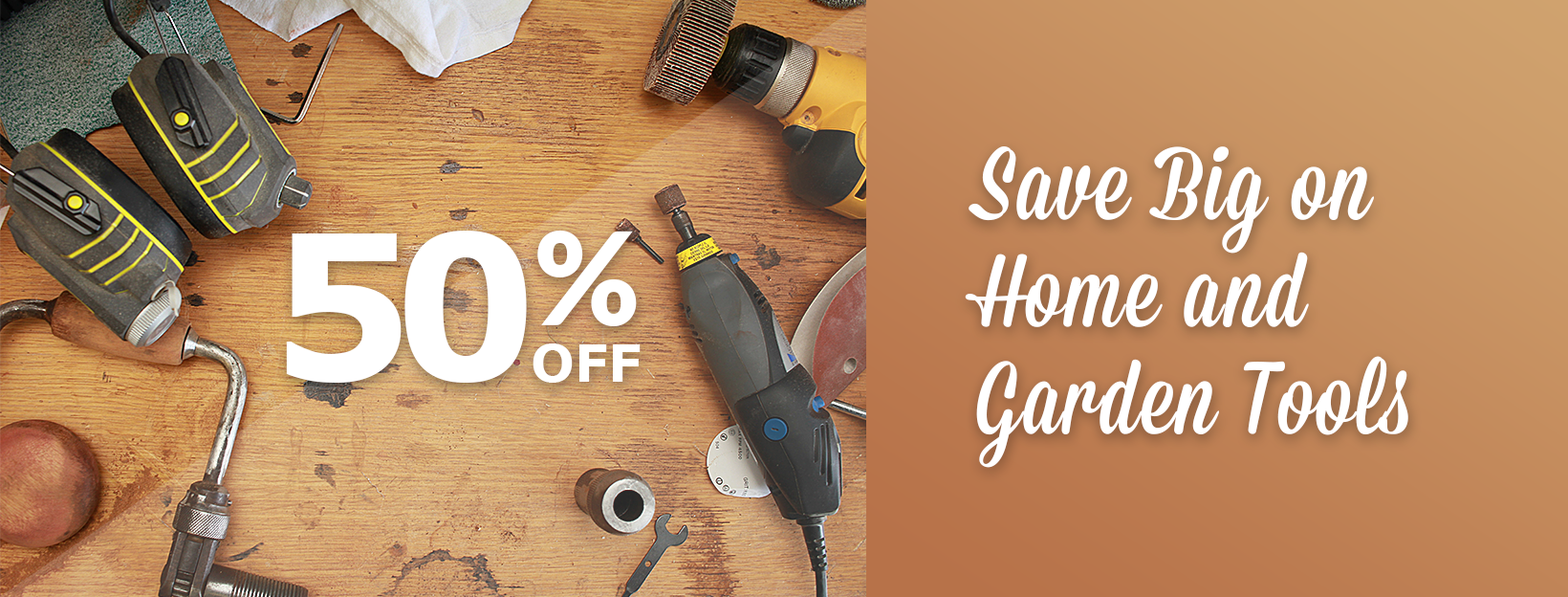
<style>
.page{position:relative;width:1568px;height:597px}
.page>*{position:absolute;margin:0}
.t1{font:102.3px/107.1px "Mission-Script";letter-spacing:0.02em;color:#ffffff}
.t2{font:201.7px "Verdana-Bold";letter-spacing:-0.1em;color:#ffffff}
.t3{font:128.1px "Lato-Black";color:#ffffff}
.t4{font:51.6px "Verdana-Bold";color:#ffffff;text-transform:uppercase}
</style>
<div class="page">
<p class="t1" style="left:965px;top:146px;width:443px;height:322px">Save Big on<br>Home and<br>Garden Tools</p>
<p class="t2" style="left:286px;top:230px;width:241px;height:152px">50</p>
<p class="t3" style="left:537px;top:230px;width:100px;height:96px">%</p>
<p class="t4" style="left:533px;top:343px;width:108px;height:39px">Off</p>
</div>
